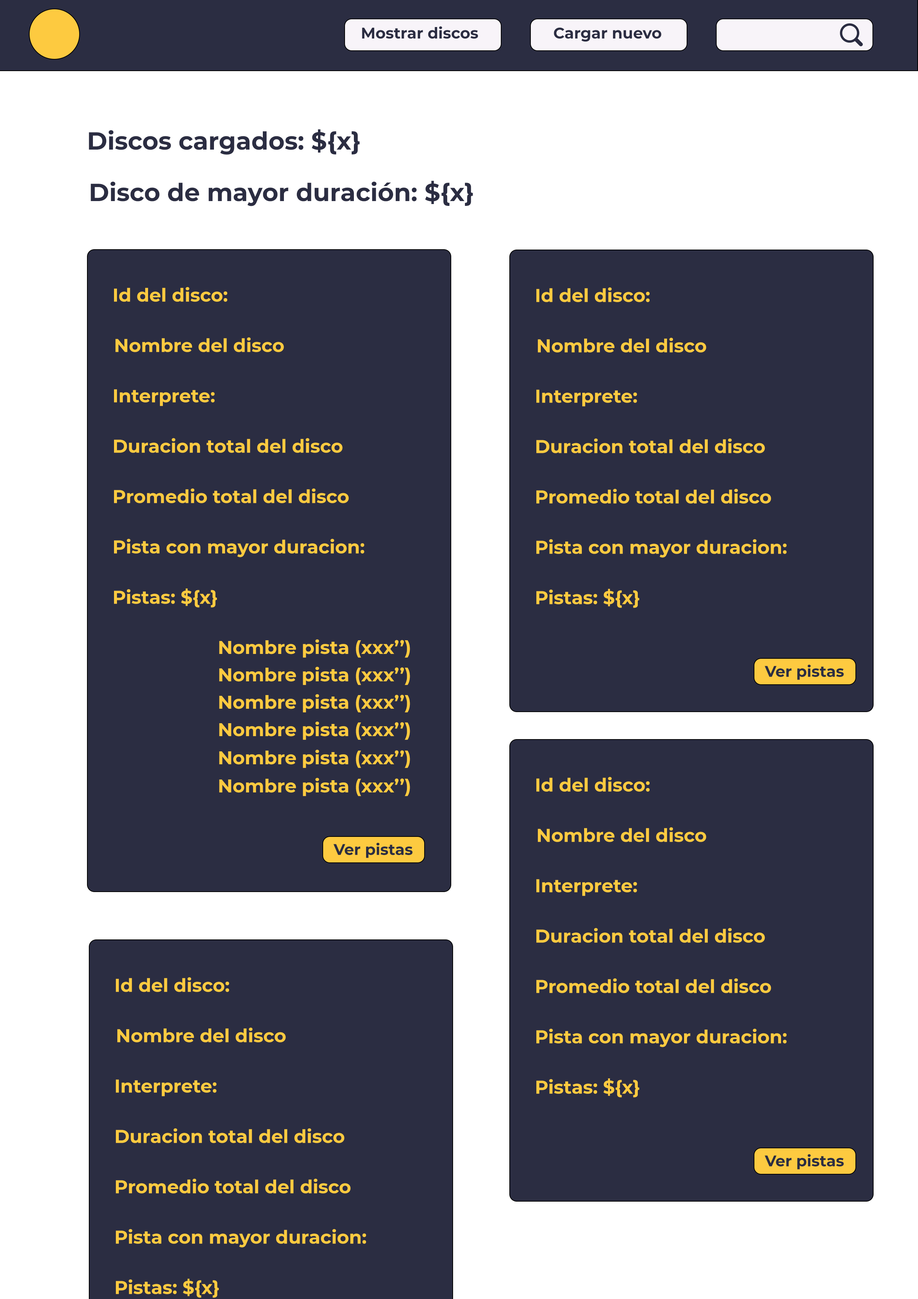
<style>
.page{position:relative;width:918px;height:1299px;background:#2b2d42}
.page>*{position:absolute;margin:0}
.t1{font:15.4px "Montserrat-Bold";color:#2b2d42}
.t2{font:24.7px "Montserrat-Bold";color:#2b2d42}
.t3{font:18.5px "Montserrat-Bold";color:#fdca40}
</style>
<div class="page">
<p class="t1" style="left:362px;top:26px;width:116px;height:13px">Mostrar discos</p>
<p class="t1" style="left:554px;top:27px;width:108px;height:15px">Cargar nuevo</p>
<p class="t2" style="left:89px;top:129px;width:271px;height:26px">Discos cargados: ${x}</p>
<p class="t2" style="left:91px;top:181px;width:382px;height:25px">Disco de mayor duración: ${x}</p>
<p class="t3" style="left:114px;top:287px;width:113px;height:15px">Id del disco:</p>
<p class="t3" style="left:536px;top:287px;width:114px;height:15px">Id del disco:</p>
<p class="t3" style="left:116px;top:337px;width:168px;height:15px">Nombre del disco</p>
<p class="t3" style="left:538px;top:338px;width:168px;height:14px">Nombre del disco</p>
<p class="t3" style="left:114px;top:389px;width:101px;height:17px">Interprete:</p>
<p class="t3" style="left:536px;top:389px;width:101px;height:18px">Interprete:</p>
<p class="t3" style="left:114px;top:438px;width:229px;height:15px">Duracion total del disco</p>
<p class="t3" style="left:536px;top:438px;width:229px;height:15px">Duracion total del disco</p>
<p class="t3" style="left:114px;top:488px;width:235px;height:15px">Promedio total del disco</p>
<p class="t3" style="left:536px;top:489px;width:235px;height:15px">Promedio total del disco</p>
<p class="t3" style="left:114px;top:539px;width:250px;height:18px">Pista con mayor duracion:</p>
<p class="t3" style="left:536px;top:539px;width:251px;height:19px">Pista con mayor duracion:</p>
<p class="t3" style="left:114px;top:588px;width:103px;height:20px">Pistas: ${x}</p>
<p class="t3" style="left:536px;top:589px;width:103px;height:19px">Pistas: ${x}</p>
<p class="t3" style="left:219px;top:639px;width:191px;height:19px">Nombre pista (xxx’’)</p>
<p class="t1" style="left:765px;top:665px;width:79px;height:15px">Ver pistas</p>
<p class="t3" style="left:219px;top:666px;width:191px;height:19px">Nombre pista (xxx’’)</p>
<p class="t3" style="left:219px;top:694px;width:191px;height:18px">Nombre pista (xxx’’)</p>
<p class="t3" style="left:219px;top:721px;width:191px;height:19px">Nombre pista (xxx’’)</p>
<p class="t3" style="left:219px;top:749px;width:191px;height:19px">Nombre pista (xxx’’)</p>
<p class="t3" style="left:219px;top:777px;width:191px;height:19px">Nombre pista (xxx’’)</p>
<p class="t3" style="left:536px;top:777px;width:114px;height:15px">Id del disco:</p>
<p class="t3" style="left:538px;top:827px;width:168px;height:15px">Nombre del disco</p>
<p class="t1" style="left:333px;top:843px;width:80px;height:15px">Ver pistas</p>
<p class="t3" style="left:536px;top:879px;width:101px;height:17px">Interprete:</p>
<p class="t3" style="left:536px;top:928px;width:229px;height:15px">Duracion total del disco</p>
<p class="t3" style="left:116px;top:977px;width:113px;height:15px">Id del disco:</p>
<p class="t3" style="left:536px;top:978px;width:235px;height:15px">Promedio total del disco</p>
<p class="t3" style="left:117px;top:1027px;width:169px;height:15px">Nombre del disco</p>
<p class="t3" style="left:536px;top:1028px;width:251px;height:19px">Pista con mayor duracion:</p>
<p class="t3" style="left:116px;top:1079px;width:101px;height:17px">Interprete:</p>
<p class="t3" style="left:536px;top:1078px;width:103px;height:19px">Pistas: ${x}</p>
<p class="t3" style="left:116px;top:1128px;width:229px;height:15px">Duracion total del disco</p>
<p class="t1" style="left:765px;top:1154px;width:79px;height:15px">Ver pistas</p>
<p class="t3" style="left:116px;top:1178px;width:235px;height:15px">Promedio total del disco</p>
<p class="t3" style="left:116px;top:1229px;width:250px;height:18px">Pista con mayor duracion:</p>
<p class="t3" style="left:116px;top:1278px;width:103px;height:20px">Pistas: ${x}</p>
</div>
